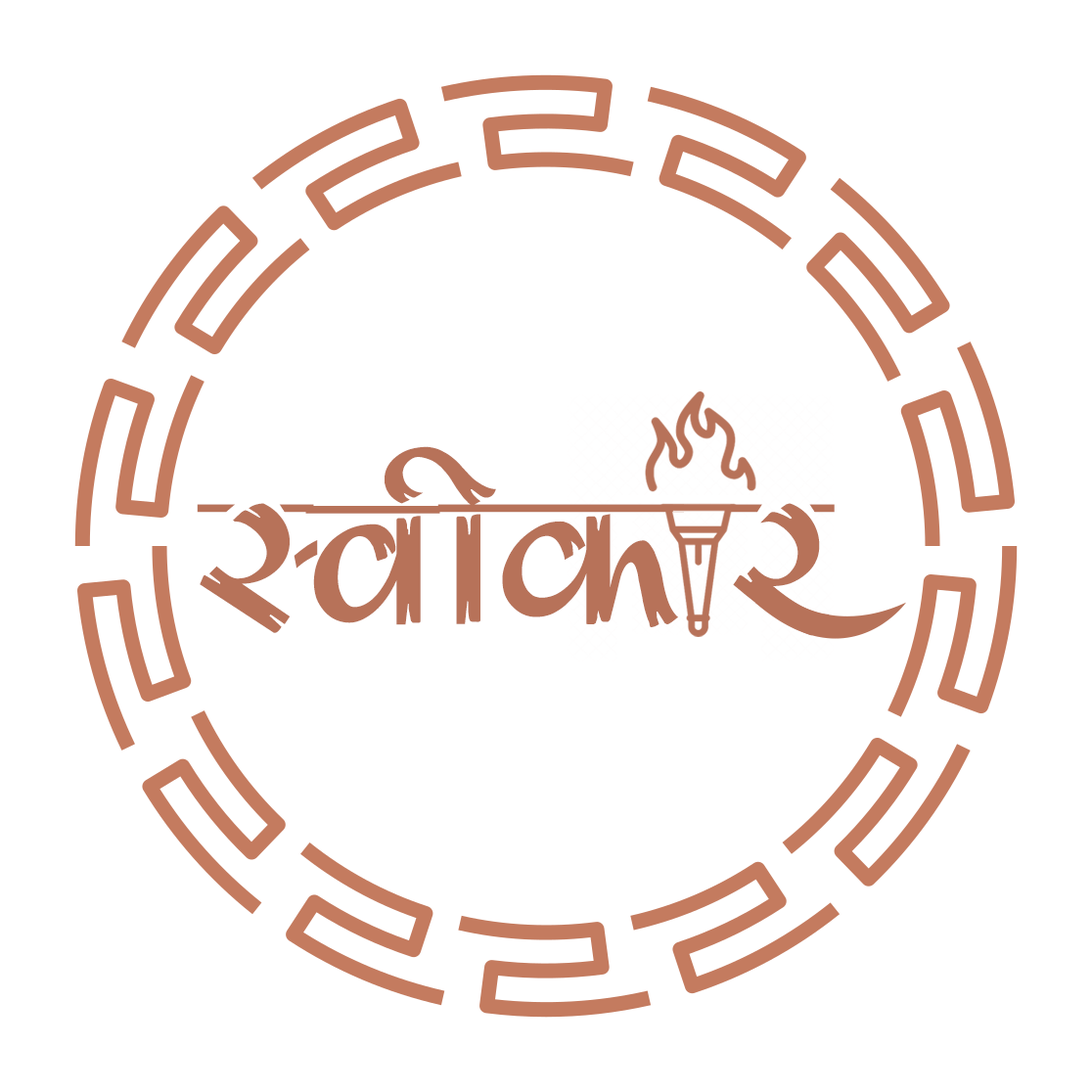
<style>
.page{position:relative;width:1092px;height:1092px;background:#ffffff}
.page>*{position:absolute;margin:0}
.t1{font:237.7px "DevLys-180";color:#b77259}
.t2{font:237.7px "DevLys-180";color:#ffffff}
</style>
<div class="page">
<p class="t1" style="left:197px;top:446px;width:638px;height:190px">Lohd<span class="t2">k</span>j</p>
</div>
